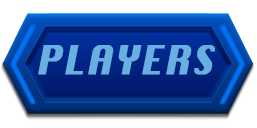
<style>
.page{position:relative;width:257px;height:128px;background:#ffffff}
.page>*{position:absolute;margin:0}
.t1{font:38.7px "Silom";color:#67b0e1;font-weight:bold;font-style:italic}
</style>
<div class="page">
<p class="t1" style="left:38px;top:45px;width:177px;height:30px">PLAYERS</p>
</div>
